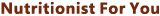
<style>
.page{position:relative;width:160px;height:16px;background:#ffffff}
.page>*{position:absolute;margin:0}
.t1{font:16px "Ebrima-Bold";color:#73290e}
</style>
<div class="page">
<p class="t1" style="left:1px;top:1px;width:158px;height:13px">Nutritionist For You</p>
</div>
